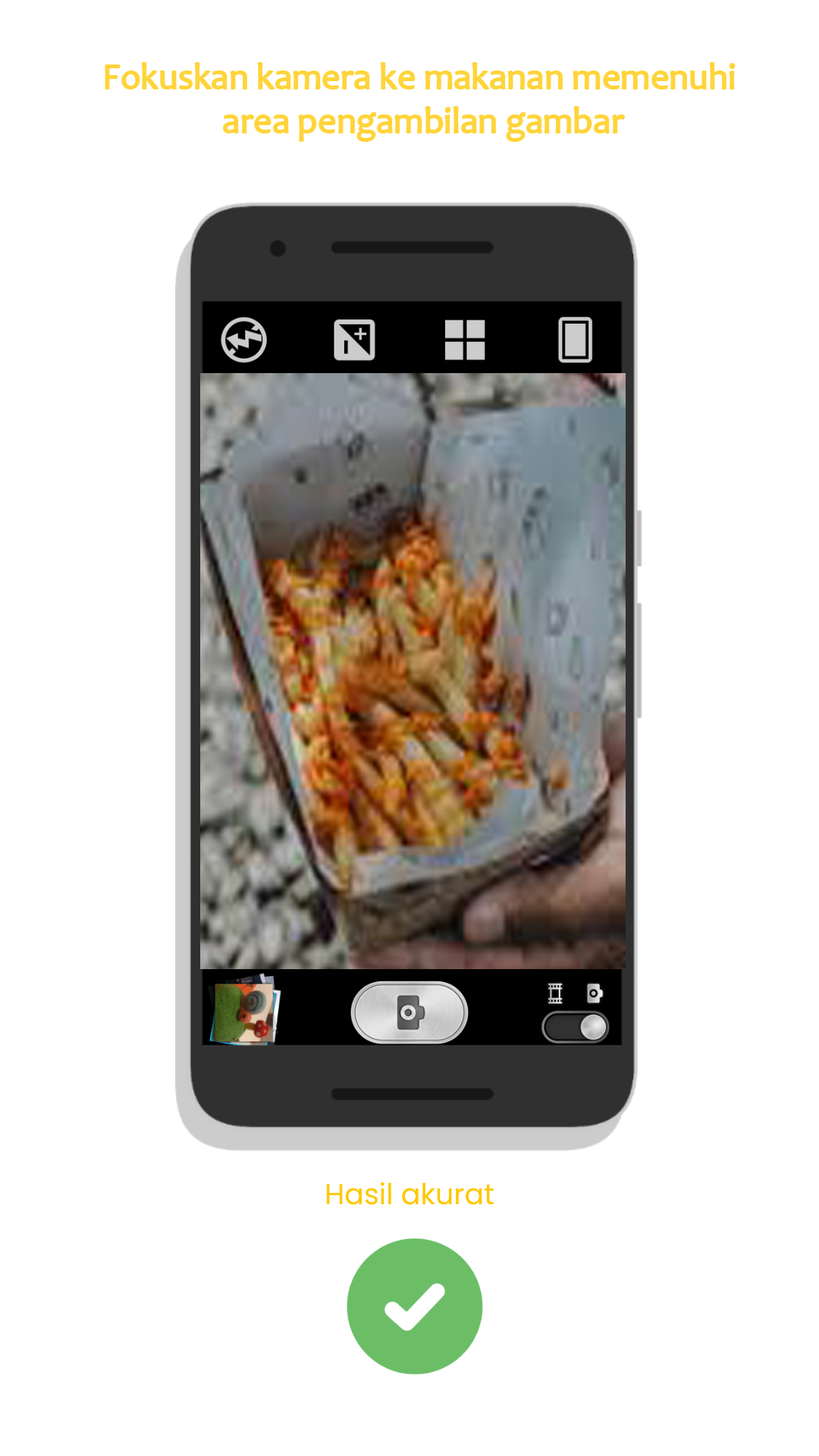
<style>
.page{position:relative;width:819px;height:1456px;background:#ffffff}
.page>*{position:absolute;margin:0}
.t1{font:36.4px "Candara";color:#ffd43a}
</style>
<div class="page">
<p class="t1" style="left:105px;top:63px;width:630px;height:78px;text-align:center">Fokuskan kamera ke makanan memenuhi <br>area pengambilan gambar</p>
</div>
